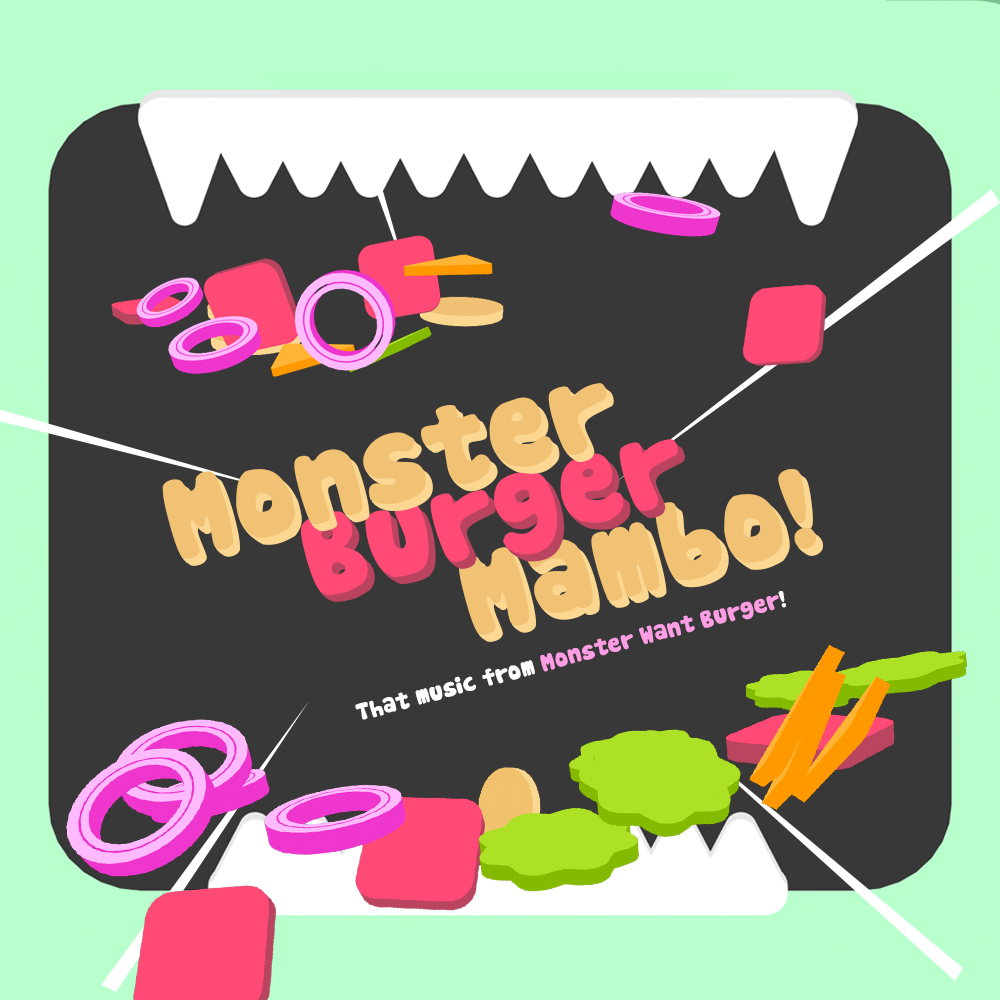
<style>
.page{position:relative;width:1000px;height:1000px;background:#383838}
.page>*{position:absolute;margin:0}
.t1{font:111.9px "Cookies";color:#f1c174}
.t2{font:111.9px "Cookies";color:#ff4a75}
.t3{font:111.9px "Cookies"}
.t4{font:23.3px "Cookies";color:#fd9de3}
.t5{font:23.3px "Cookies";color:#ffffff}
</style>
<div class="page">
<p class="t1" style="left:162px;top:383px;width:445px;height:176px;rotate:-15deg">Monster</p>
<p class="t1" style="left:164px;top:386px;width:445px;height:176px;rotate:-15deg">Monster</p>
<p class="t1" style="left:166px;top:388px;width:445px;height:176px;rotate:-15deg">Monster</p>
<p class="t1" style="left:169px;top:390px;width:445px;height:176px;rotate:-15deg">Monster</p>
<p class="t2" style="left:301px;top:439px;width:377px;height:156px;rotate:-15deg">Burger</p>
<p class="t2" style="left:303px;top:442px;width:377px;height:156px;rotate:-15deg">Burger</p>
<p class="t2" style="left:305px;top:444px;width:377px;height:156px;rotate:-15deg">Burger</p>
<p class="t3" style="left:308px;top:446px;width:377px;height:156px;rotate:-15deg">Burger</p>
<p class="t1" style="left:458px;top:469px;width:358px;height:166px;rotate:-15deg">Mambo!</p>
<p class="t1" style="left:460px;top:472px;width:358px;height:166px;rotate:-15deg">Mambo!</p>
<p class="t1" style="left:462px;top:474px;width:358px;height:166px;rotate:-15deg">Mambo!</p>
<p class="t1" style="left:465px;top:476px;width:358px;height:166px;rotate:-15deg">Mambo!</p>
<p class="t4" style="left:355px;top:591px;width:431px;height:129px;rotate:-15deg"><span class="t5">That music from </span>Monster Want Burger<span class="t5">!</span></p>
</div>
